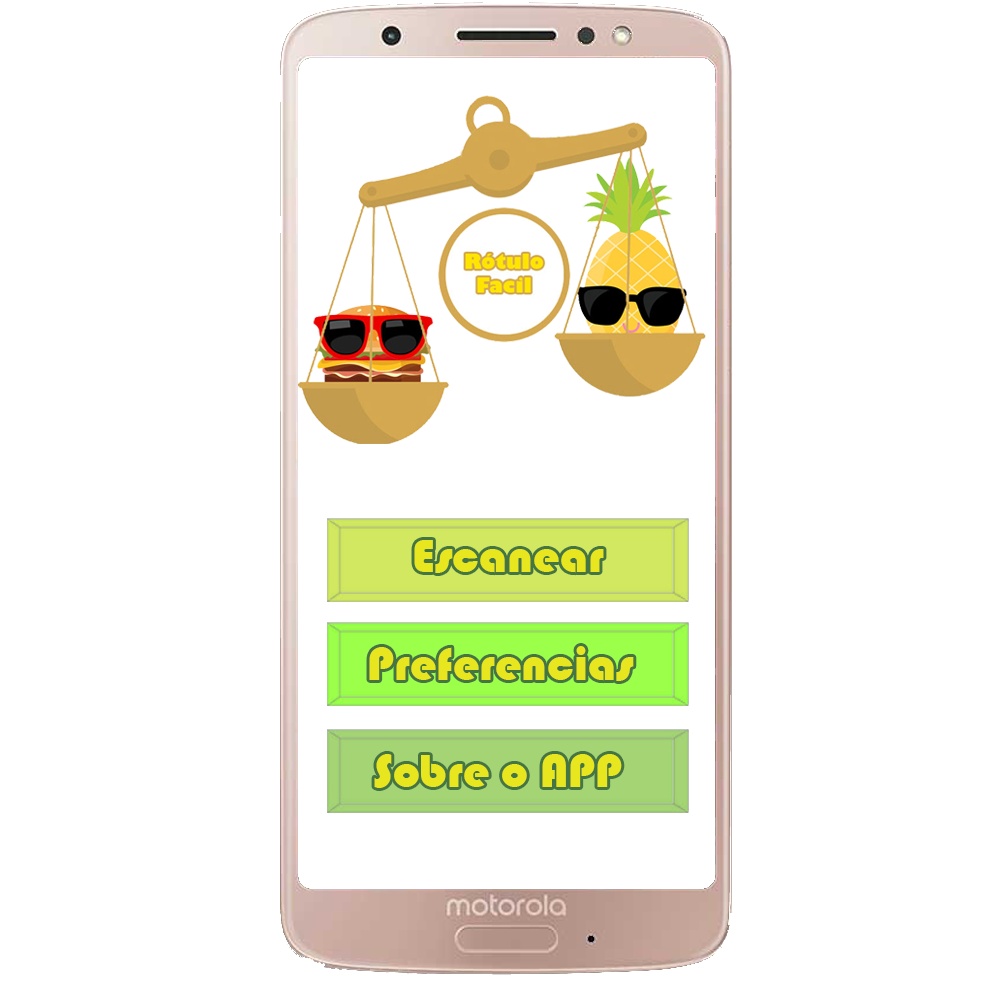
<style>
.page{position:relative;width:1000px;height:1000px;background:#ffffff}
.page>*{position:absolute;margin:0}
.t1{font:48px "Bauhaus93";color:#e8e61f}
</style>
<div class="page">
<p class="t1" style="left:414px;top:540px;width:190px;height:33px">Escanear</p>
<p class="t1" style="left:369px;top:646px;width:265px;height:35px">Preferencias</p>
<p class="t1" style="left:374px;top:754px;width:248px;height:34px">Sobre o APP</p>
</div>
